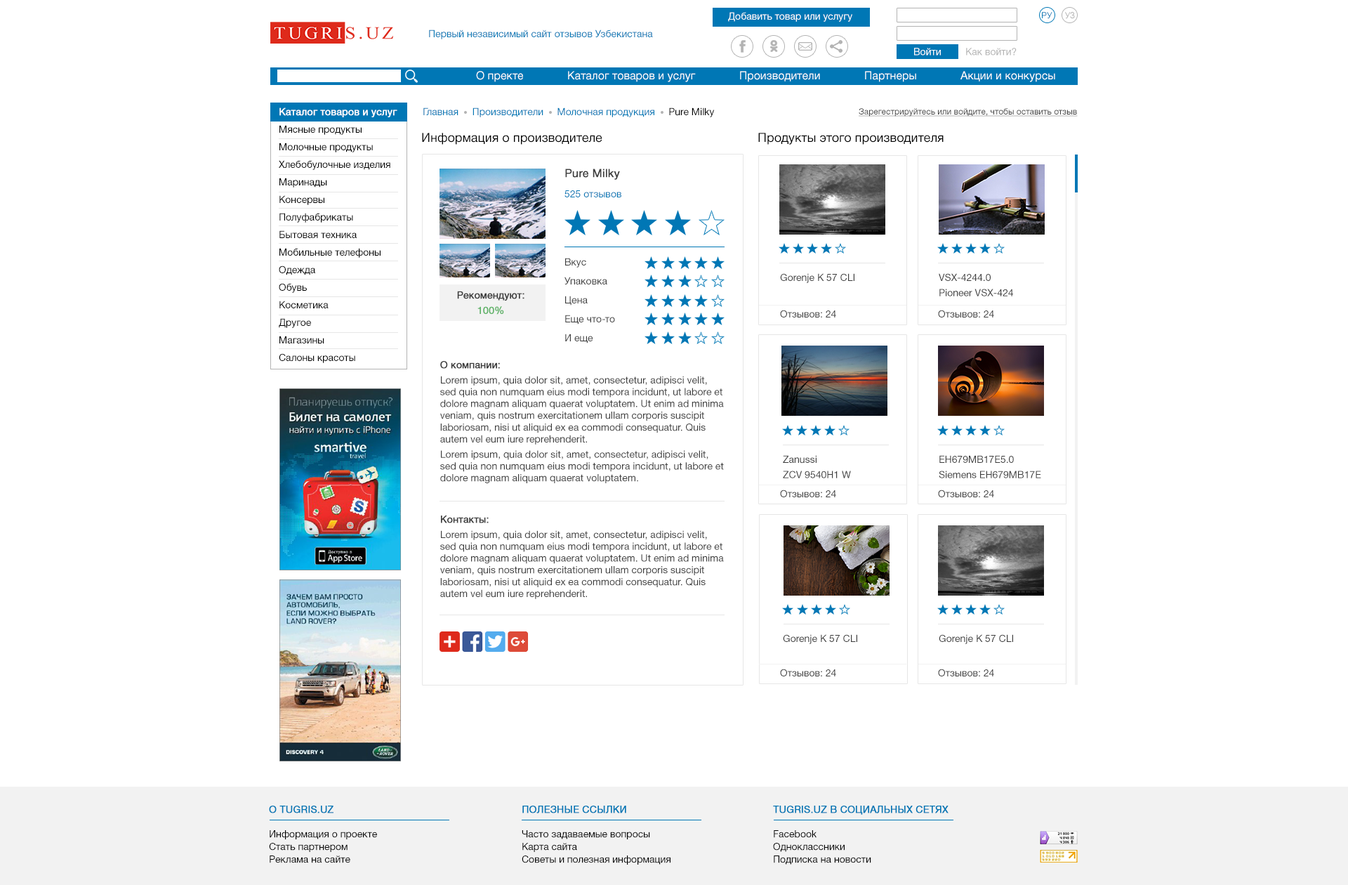
<style>
.page{position:relative;width:1348px;height:885px;background:#ffffff}
.page>*{position:absolute;margin:0}
.t1{font:9.8px "HelveticaNeueCyr-Roman";color:#ffffff}
.t2{font:8.4px "ArialMT";color:#0077b5;text-transform:uppercase}
.t3{font:8.4px "ArialMT";color:#b3b3b3;text-transform:uppercase}
.t4{font:9.8px "HelveticaNeueCyr-Roman";color:#0077b5}
.t5{font:9.8px "HelveticaNeueCyr-Roman";color:#b3b3b3}
.t6{font:11.2px "HelveticaNeueCyr-Roman";color:#ffffff}
.t7{font:9.8px/14px "HelveticaNeueCyr-Roman";color:#000000}
.t8{font:9.8px/14px "HelveticaNeueCyr-Roman";color:#ffffff;font-weight:bold}
.t9{font:9.8px "HelveticaNeueCyr-Roman";color:#000000}
.t10{font:8.4px "HelveticaNeueCyr-Roman";color:#3d3d3d;text-decoration:underline}
.t11{font:12.6px "HelveticaNeueCyr-Roman";color:#000000}
.t12{font:11.2px "HelveticaNeueCyr-Roman";color:#3d3d3d;font-weight:bold}
.t13{font:9.8px/15.4px "HelveticaNeueCyr-Roman";color:#3d3d3d}
.t14{font:9.8px "HelveticaNeueCyr-Roman";color:#3d3d3d}
.t15{font:9.8px "HelveticaNeueCyr-Roman";color:#3d3d3d;font-weight:bold}
.t16{font:9.8px "HelveticaNeueCyr-Roman";color:#60b369;font-weight:bold}
.t17{font:9.8px/12.6px "HelveticaNeueCyr-Roman";color:#000000}
.t18{font:9.8px "HelveticaNeueCyr-Roman";color:#0077b5;text-transform:uppercase;font-weight:bold}
</style>
<div class="page">
<p class="t1" style="left:728px;top:12px;width:124px;height:10px">Добавить товар или услугу</p>
<p class="t2" style="left:1042px;top:12px;width:10px;height:7px">ру</p>
<p class="t3" style="left:1065px;top:12px;width:10px;height:7px">уз</p>
<p class="t4" style="left:429px;top:29px;width:224px;height:10px">Первый независимый сайт отзывов Узбекистана</p>
<p class="t1" style="left:914px;top:48px;width:27px;height:7px">Войти</p>
<p class="t5" style="left:966px;top:48px;width:51px;height:7px">Как войти?</p>
<p class="t6" style="left:476px;top:71px;width:579px;height:11px">О пректе              Каталог товаров и услуг              Производители              Партнеры              Акции и конкурсы</p>
<p class="t7" style="left:279px;top:107px;width:118px;height:256px"><span class="t8">Каталог товаров и услуг<br></span>Мясные продукты<br>Молочные продукты<br>Хлебобулочные изделия<br>Маринады<br>Консервы<br>Полуфабрикаты<br>Бытовая техника<br>Мобильные телефоны<br>Одежда<br>Обувь<br>Косметика<br>Другое<br>Магазины<br>Салоны красоты</p>
<p class="t4" style="left:423px;top:107px;width:292px;height:10px">Главная     Производители     Молочная продукция     <span class="t9">Pure Milky</span></p>
<p class="t10" style="left:859px;top:108px;width:219px;height:9px">Зарегестрируйтесь или войдите, чтобы оставить отзыв</p>
<p class="t11" style="left:422px;top:133px;width:180px;height:12px">Информация о производителе</p>
<p class="t11" style="left:758px;top:133px;width:186px;height:12px">Продукты этого производителя</p>
<p class="t12" style="left:565px;top:168px;width:55px;height:12px">Pure Milky</p>
<p class="t4" style="left:564px;top:190px;width:57px;height:7px">525 отзывов</p>
<p class="t13" style="left:564px;top:258px;width:51px;height:85px">Вкус<br>Упаковка<br>Цена<br>Еще что-то<br>И еще</p>
<p class="t14" style="left:780px;top:273px;width:74px;height:10px">Gorenje K 57 CLI</p>
<p class="t14" style="left:939px;top:273px;width:74px;height:23px">VSX-4244.0<br>Pioneer VSX-424</p>
<p class="t15" style="left:457px;top:291px;width:67px;height:24px;text-align:center">Рекомендуют:<br><span class="t16">100%</span></p>
<p class="t14" style="left:780px;top:310px;width:56px;height:7px">Отзывов: 24</p>
<p class="t14" style="left:938px;top:310px;width:56px;height:7px">Отзывов: 24</p>
<p class="t14" style="left:440px;top:361px;width:284px;height:122px"><span class="t15">О компании:<br></span>Lorem ipsum, quia dolor sit, amet, consectetur, adipisci velit, sed quia non numquam eius modi tempora incidunt, ut labore et dolore magnam aliquam quaerat voluptatem. Ut enim ad minima veniam, quis nostrum exercitationem ullam corporis suscipit laboriosam, nisi ut aliquid ex ea commodi consequatur. Quis autem vel eum iure reprehenderit.<br>Lorem ipsum, quia dolor sit, amet, consectetur, adipisci velit, sed quia non numquam eius modi tempora incidunt, ut labore et dolore magnam aliquam quaerat voluptatem.</p>
<p class="t14" style="left:783px;top:455px;width:68px;height:23px">Zanussi<br>ZCV 9540H1 W</p>
<p class="t14" style="left:939px;top:455px;width:102px;height:23px">EH679MB17E5.0<br>Siemens EH679MB17E</p>
<p class="t14" style="left:780px;top:489px;width:56px;height:8px">Отзывов: 24</p>
<p class="t14" style="left:938px;top:489px;width:56px;height:8px">Отзывов: 24</p>
<p class="t14" style="left:440px;top:515px;width:284px;height:84px"><span class="t15">Контакты:<br></span>Lorem ipsum, quia dolor sit, amet, consectetur, adipisci velit, sed quia non numquam eius modi tempora incidunt, ut labore et dolore magnam aliquam quaerat voluptatem. Ut enim ad minima veniam, quis nostrum exercitationem ullam corporis suscipit laboriosam, nisi ut aliquid ex ea commodi consequatur. Quis autem vel eum iure reprehenderit.</p>
<p class="t14" style="left:783px;top:634px;width:74px;height:10px">Gorenje K 57 CLI</p>
<p class="t14" style="left:939px;top:634px;width:74px;height:10px">Gorenje K 57 CLI</p>
<p class="t14" style="left:780px;top:668px;width:56px;height:8px">Отзывов: 24</p>
<p class="t14" style="left:938px;top:668px;width:56px;height:8px">Отзывов: 24</p>
<p class="t17" style="left:269px;top:805px;width:108px;height:58px"><span class="t18">О Tugris.uz<br><br></span>Информация о проекте<br>Стать партнером<br>Реклама на сайте</p>
<p class="t17" style="left:522px;top:805px;width:148px;height:59px"><span class="t18">Полезные ссылки<br><br></span>Часто задаваемые вопросы<br>Карта сайта<br>Советы и полезная информация</p>
<p class="t17" style="left:773px;top:805px;width:175px;height:59px"><span class="t18">Tugris.uz в социальных сетях<br><br></span>Facebook<br>Одноклассники<br>Подписка на новости</p>
</div>
